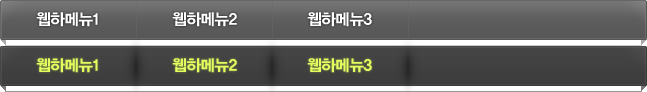
<style>
.page{position:relative;width:647px;height:92px}
.page>*{position:absolute;margin:0}
.t1{font:16px "YDIYGO150-KSCPC-EUC-H";letter-spacing:-0.12em;color:#ffffff}
.t2{font:16px "YDIYGO150-KSCPC-EUC-H";letter-spacing:-0.12em;color:#e3ff5f}
</style>
<div class="page">
<p class="t1" style="left:36px;top:12px;width:62px;height:15px">웹하메뉴1</p>
<p class="t1" style="left:172px;top:12px;width:65px;height:15px">웹하메뉴2</p>
<p class="t1" style="left:307px;top:12px;width:65px;height:15px">웹하메뉴3</p>
<p class="t2" style="left:36px;top:58px;width:62px;height:15px">웹하메뉴1</p>
<p class="t2" style="left:172px;top:58px;width:65px;height:15px">웹하메뉴2</p>
<p class="t2" style="left:307px;top:58px;width:65px;height:15px">웹하메뉴3</p>
</div>
